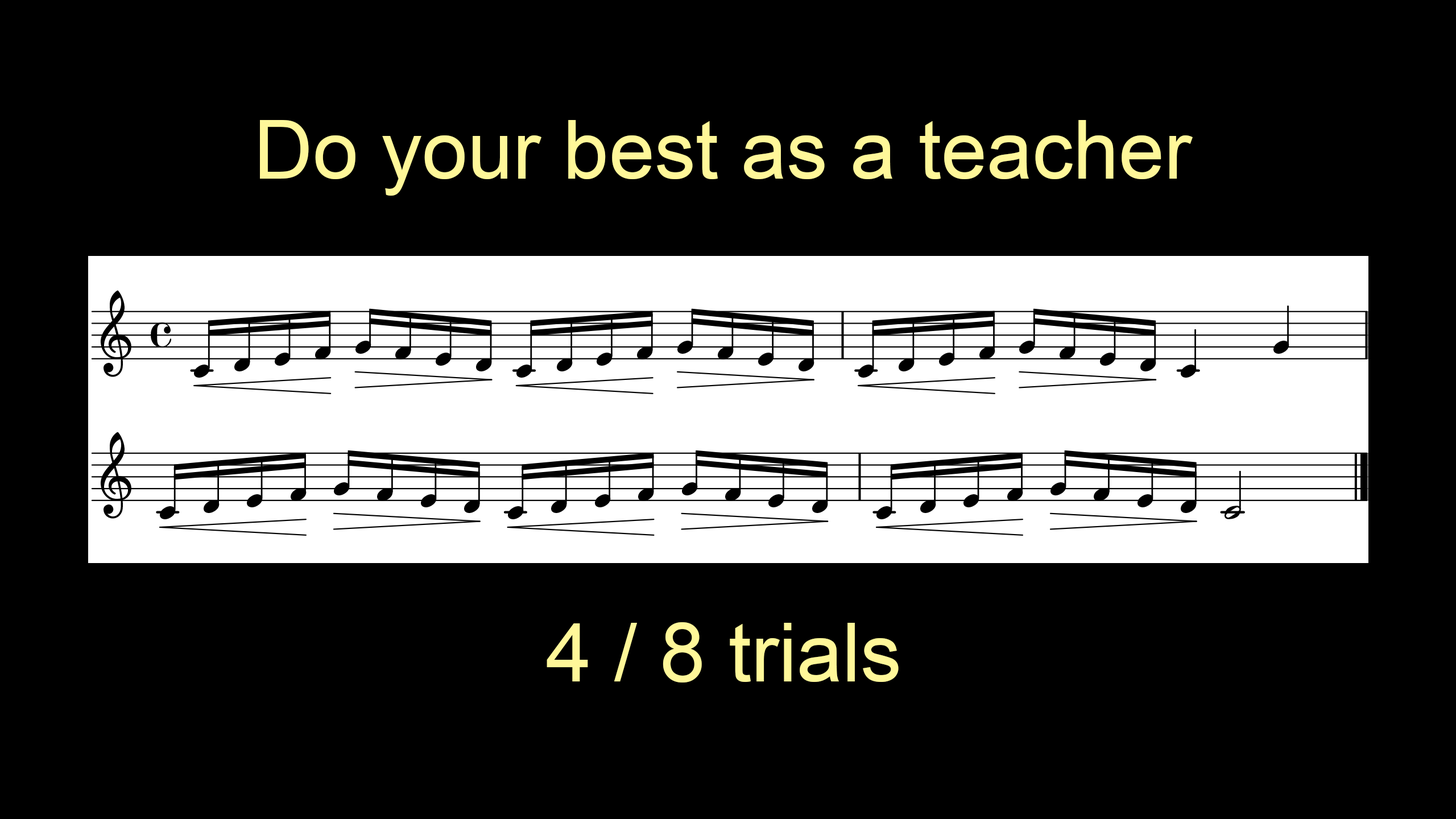
<style>
.page{position:relative;width:1456px;height:819px;background:#000000}
.page>*{position:absolute;margin:0}
.t1{font:81.9px "ArialMT";color:#fff799}
</style>
<div class="page">
<p class="t1" style="left:260px;top:120px;width:933px;height:76px">Do your best as a teacher</p>
<p class="t1" style="left:547px;top:622px;width:352px;height:60px">4 / 8 trials</p>
</div>
